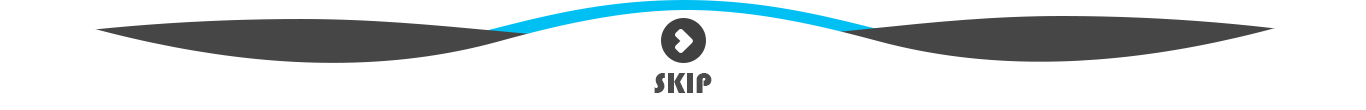
<style>
.page{position:relative;width:1366px;height:110px;background:#ffffff}
.page>*{position:absolute;margin:0}
.t1{font:30px "Bauhaus93";color:#4b4b4b}
</style>
<div class="page">
<p class="t1" style="left:654px;top:73px;width:58px;height:20px">SKIP</p>
</div>
